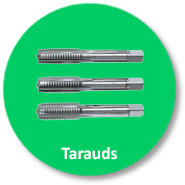
<style>
.page{position:relative;width:185px;height:185px;background:#00cc66}
.page>*{position:absolute;margin:0}
.t1{font:17.8px "Calibri-Bold";color:#ffffff}
</style>
<div class="page">
<p class="t1" style="left:61px;top:147px;width:56px;height:13px">Tarauds</p>
</div>
